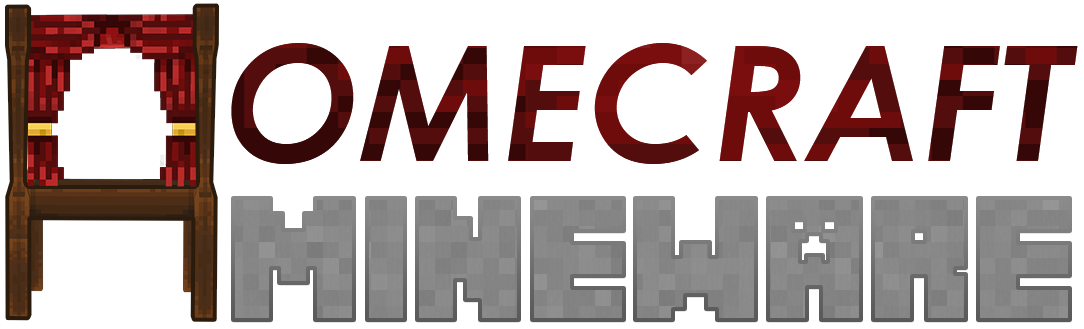
<style>
.page{position:relative;width:1084px;height:329px;background:#ffffff}
.page>*{position:absolute;margin:0}
.t1{font:160.3px "CenturyGothic-BoldItalic"}
.t2{font:154.6px "Minecrafter";color:#888888}
</style>
<div class="page">
<p class="t1" style="left:231px;top:43px;width:847px;height:121px">OMECRAFT</p>
<p class="t2" style="left:233px;top:198px;width:837px;height:122px">mineware</p>
<p class="t2" style="left:233px;top:198px;width:837px;height:122px">mineware</p>
</div>
